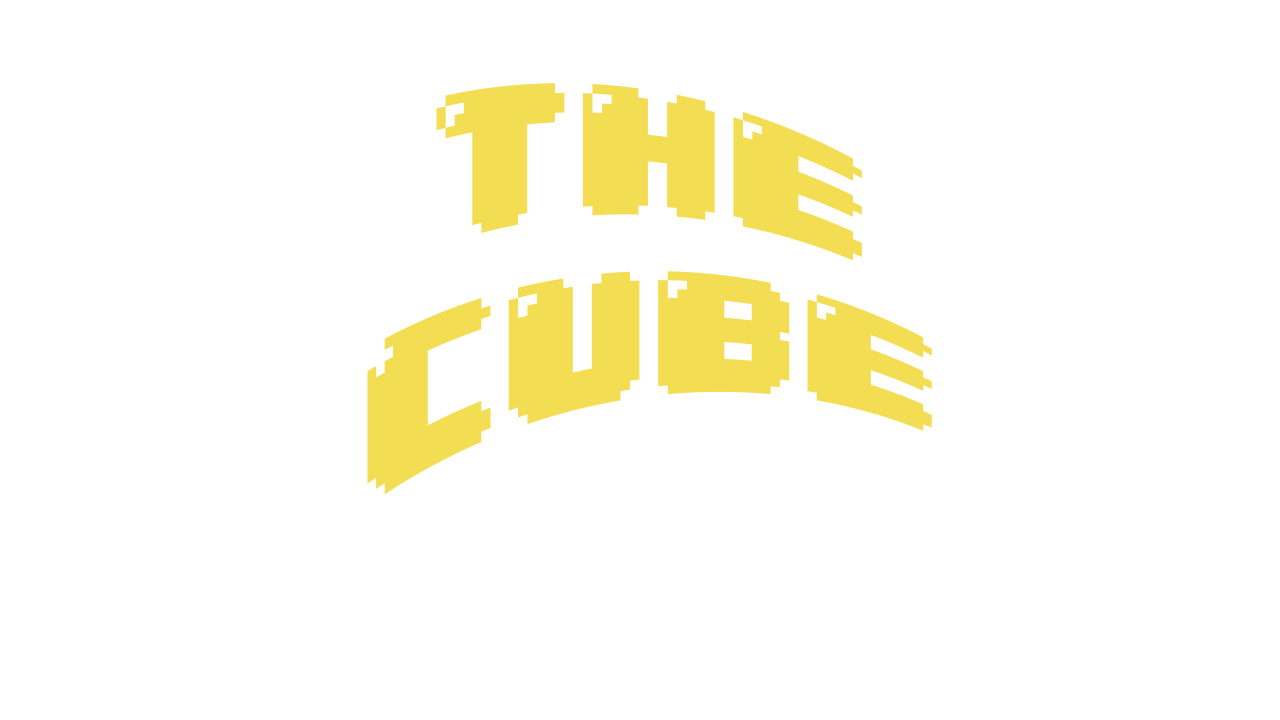
<style>
.page{position:relative;width:1280px;height:720px;background:#ffffff}
.page>*{position:absolute;margin:0}
.t1{font:150px "04b30";color:#f2dd53}
</style>
<div class="page">
<p class="t1" style="left:367px;top:83px;width:565px;height:412px;text-align:center">THE CUBE</p>
</div>
